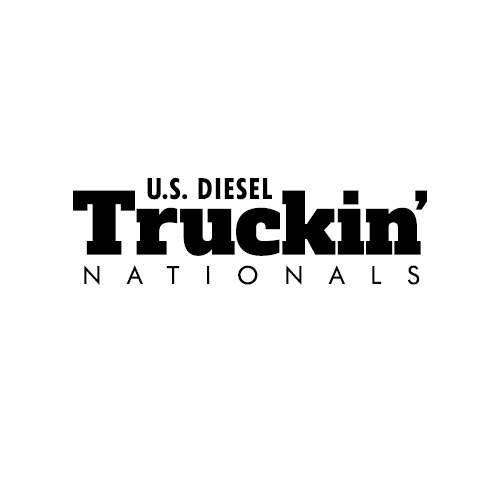
<style>
.page{position:relative;width:500px;height:500px;background:#ffffff}
.page>*{position:absolute;margin:0}
.t1{font:29.2px "FuturaBT-BoldCondensed";letter-spacing:0.045em;color:#000000}
.t2{font:82.1px "AlfaSlabOne-Regular";color:#000000}
.t3{font:82.1px "AlfaSlabOne-Regular";letter-spacing:0.045em;color:#000000}
.t4{font:82.1px "AlfaSlabOne-Regular";letter-spacing:-0.1em;color:#000000}
.t5{font:25px "FuturaBT-Book";letter-spacing:1.02em;color:#000000;text-transform:uppercase}
</style>
<div class="page">
<p class="t1" style="left:147px;top:177px;width:125px;height:23px">U.S. DIESEL</p>
<p class="t2" style="left:73px;top:190px;width:354px;height:66px">T<span class="t3">r</span>ucki<span class="t4">n</span>’</p>
<p class="t5" style="left:84px;top:265px;width:336px;height:20px">Nationals</p>
</div>
